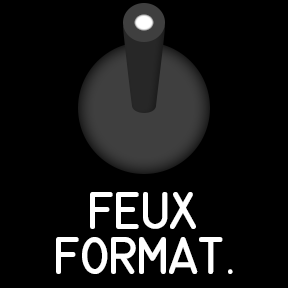
<style>
.page{position:relative;width:288px;height:288px;background:#000000}
.page>*{position:absolute;margin:0}
.t1{font:37px "MS-33558-Regular";letter-spacing:-0.04em;color:#ffffff}
.t2{font:37px "MyriadPro-Regular";letter-spacing:-0.04em;color:#ffffff}
</style>
<div class="page">
<p class="t1" style="left:56px;top:192px;width:177px;height:82px;text-align:center">FEUX<br>FORMAT<span class="t2">.</span></p>
</div>
